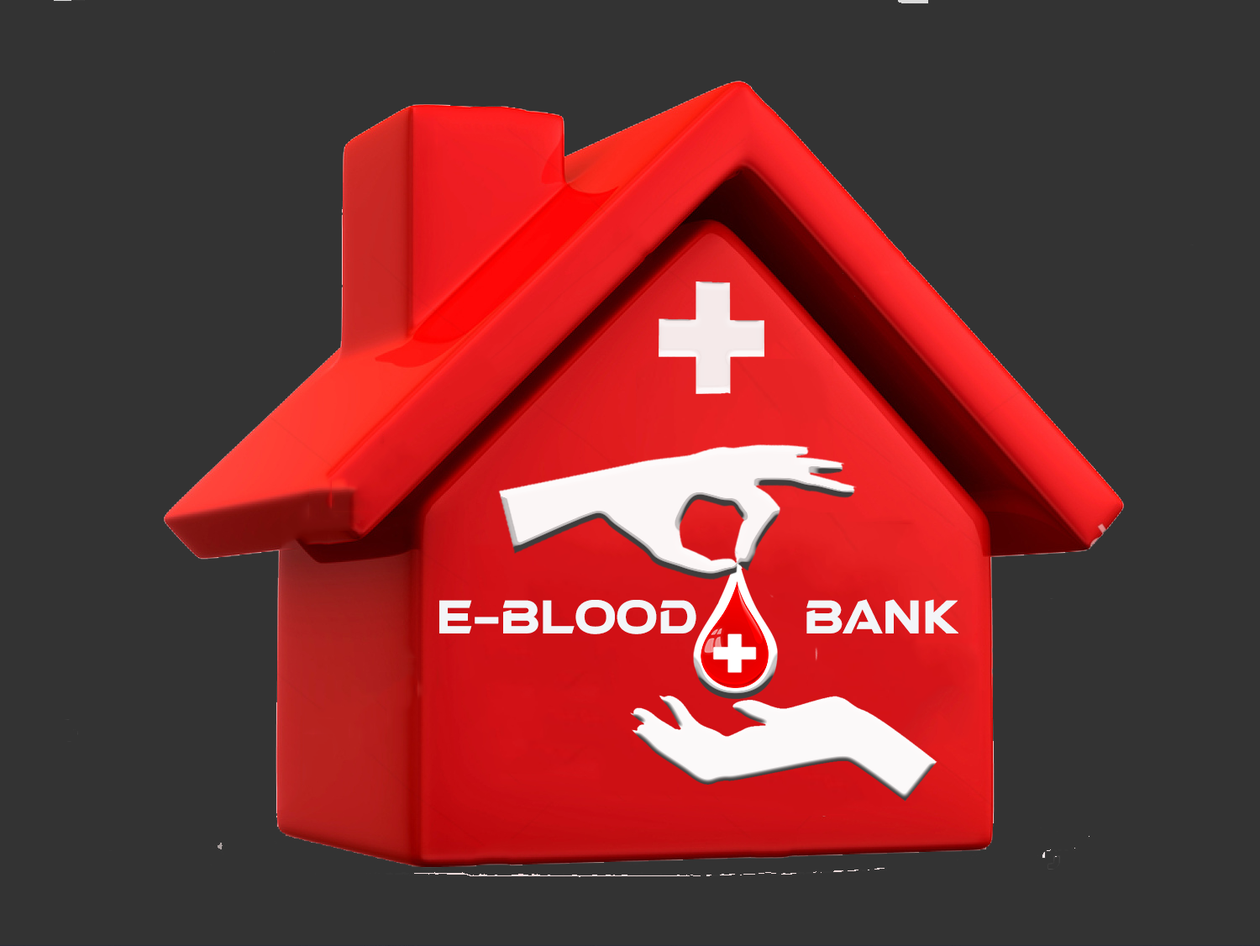
<style>
.page{position:relative;width:1260px;height:946px;background:#333333}
.page>*{position:absolute;margin:0}
.t1{font:10.1px/63px "aAtmospheric";color:#f3f5f8;font-weight:bold}
</style>
<div class="page">
<p class="t1" style="left:439px;top:599px;width:520px;height:35px;text-align:center">e-Blood       Bank</p>
</div>
